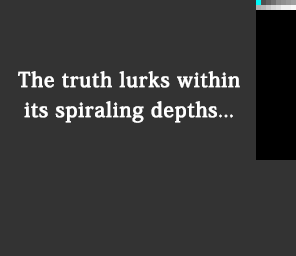
<style>
.page{position:relative;width:296px;height:256px;background:#333333}
.page>*{position:absolute;margin:0}
.t1{font:20px/30px "KozMinPro-Medium";letter-spacing:0.025em;color:#ffffff;font-weight:bold}
</style>
<div class="page">
<p class="t1" style="left:18px;top:71px;width:222px;height:52px;text-align:center">The truth lurks within<br>its spiraling depths...</p>
</div>
